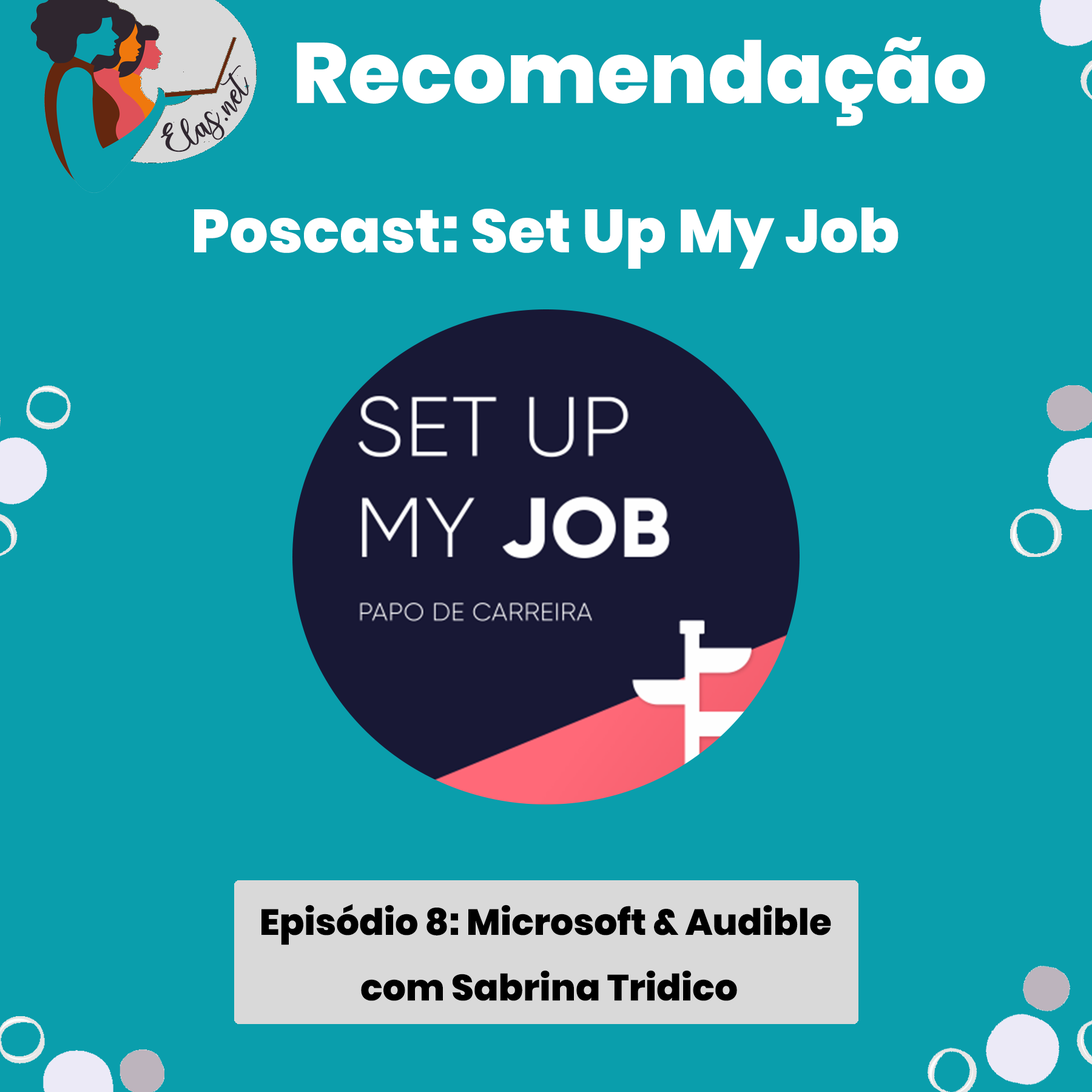
<style>
.page{position:relative;width:1092px;height:1092px;background:#0a9eac}
.page>*{position:absolute;margin:0}
.t1{font:84.9px "Poppins-ExtraBold";color:#ffffff}
.t2{font:25px "charlinda-Regular";color:#2f262f;scale:1.18 1}
.t3{font:60.7px "Poppins-ExtraBold";color:#ffffff}
.t4{font:36.4px/65.5px "Poppins-ExtraBold";color:#000000}
</style>
<div class="page">
<p class="t1" style="left:297px;top:37px;width:688px;height:89px">Recomendação</p>
<p class="t2" style="left:161px;top:65px;width:88px;height:87px;rotate:-42deg">Elas.net</p>
<p class="t3" style="left:194px;top:207px;width:704px;height:62px">Poscast: Set Up My Job</p>
<p class="t4" style="left:261px;top:904px;width:570px;height:97px;text-align:center">Episódio 8: Microsoft &amp; Audible <br>com Sabrina Tridico</p>
</div>
